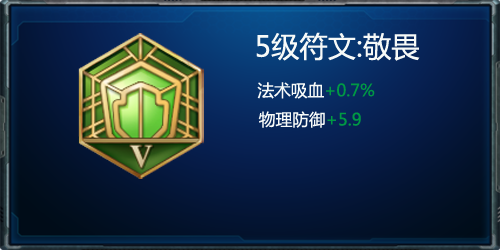
<style>
.page{position:relative;width:500px;height:250px}
.page>*{position:absolute;margin:0}
.t1{font:28.3px "MicrosoftYaHei";color:#f7faf8}
.t2{font:16.7px "MicrosoftYaHei";color:#f7faf8}
.t3{font:16.7px "MicrosoftYaHei";color:#009944}
</style>
<div class="page">
<p class="t1" style="left:256px;top:32px;width:164px;height:96px;text-align:center">5级符文:敬畏<br><span class="t2">        法术吸血</span><span class="t3">+0.7%<br></span><span class="t2">  物理防御</span><span class="t3">+5.9</span></p>
</div>
